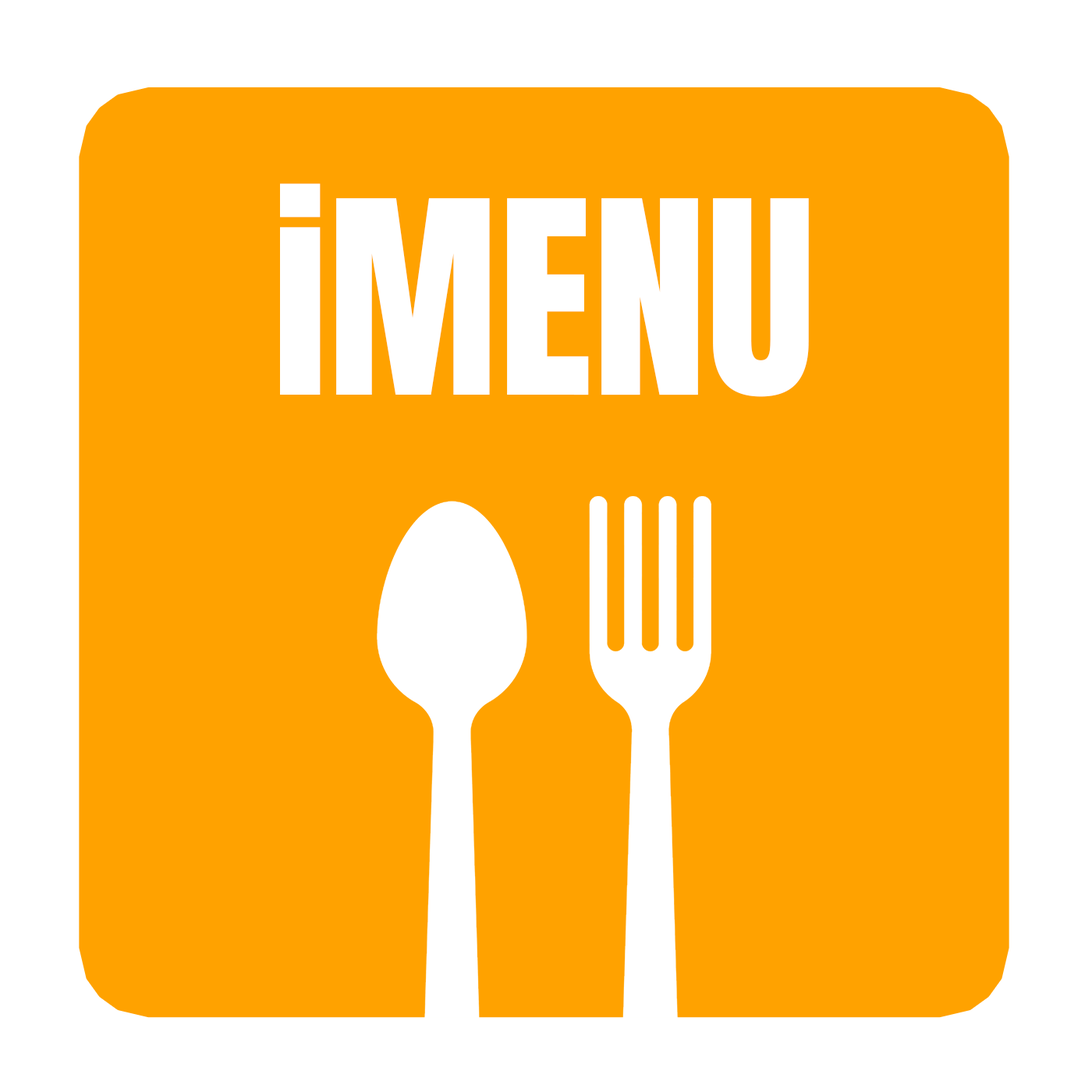
<style>
.page{position:relative;width:1092px;height:1092px;background:#ffa200}
.page>*{position:absolute;margin:0}
.t1{font:228.9px "Anton-Regular";color:#ffffff}
</style>
<div class="page">
<p class="t1" style="left:280px;top:183px;width:529px;height:214px">iMENU</p>
</div>
